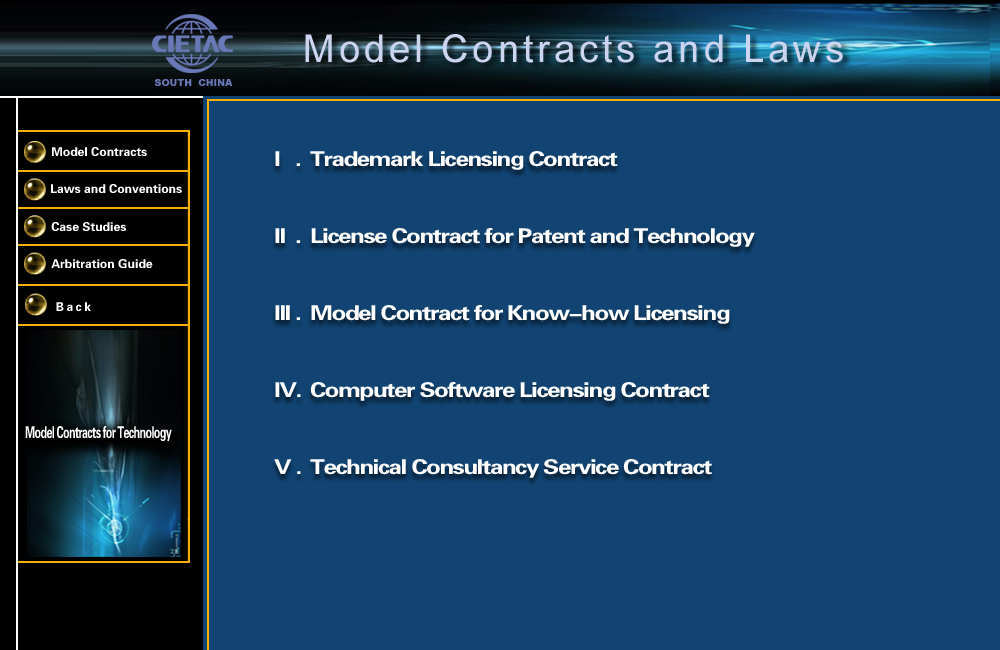
<style>
.page{position:relative;width:1000px;height:650px;background:#114473}
.page>*{position:absolute;margin:0}
.t1{font:12.2px "FZDHTJW--GB1-0";color:#ffffff}
.t2{font:20.2px/25.7px "FZDHTJW--GB1-0";letter-spacing:-0.06em;color:#ffffff;scale:1.2 1}
.t3{font:16.3px "FZDHTJW--GB1-0";letter-spacing:-0.06em;color:#ffffff;scale:0.66 1}
</style>
<div class="page">
<p class="t1" style="left:52px;top:147px;width:95px;height:9px">Model Contracts</p>
<p class="t2" style="left:274px;top:151px;width:481px;height:327px">I   . Trademark Licensing Contract<br><br><br>II  . License Contract for Patent and Technology<br><br><br>III . Model Contract for Know-how Licensing<br><br><br>IV. Computer Software Licensing Contract<br><br><br>V . Technical Consultancy Service Contract</p>
<p class="t1" style="left:51px;top:184px;width:131px;height:9px">Laws and Conventions</p>
<p class="t1" style="left:51px;top:222px;width:75px;height:9px">Case Studies</p>
<p class="t1" style="left:51px;top:259px;width:102px;height:9px">Arbitration Guide</p>
<p class="t3" style="left:25px;top:426px;width:147px;height:15px">Model Contracts for Technology</p>
</div>
